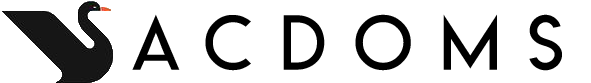
<style>
.page{position:relative;width:591px;height:83px;background:#ffffff}
.page>*{position:absolute;margin:0}
.t1{font:75px "LemonMilklight";letter-spacing:0.37em;color:#000000}
.t2{font:50px "LemonMilklight";letter-spacing:0.2em;color:#000000}
</style>
<div class="page">
<p class="t1" style="left:132px;top:14px;width:430px;height:57px"><span class="t2"> </span>Acdoms</p>
</div>
